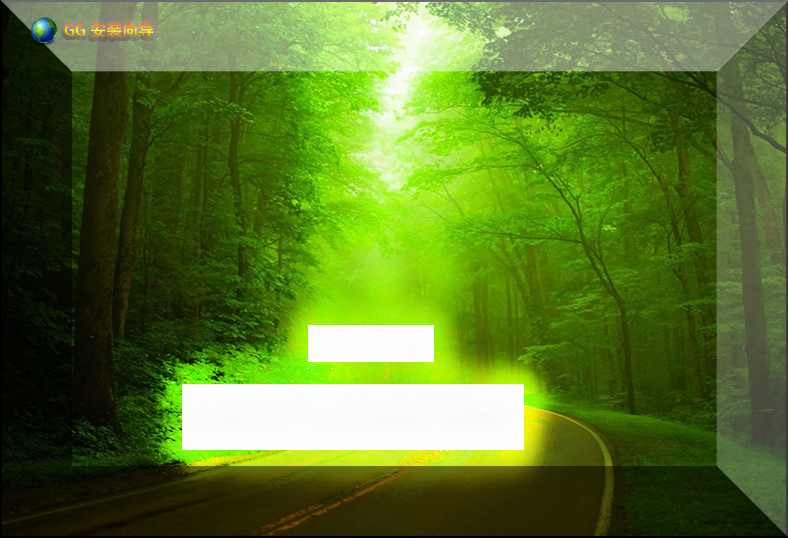
<style>
.page{position:relative;width:788px;height:538px}
.page>*{position:absolute;margin:0}
.t1{font:16px "AdobeHeitiStd-Regular"}
</style>
<div class="page">
<p class="t1" style="left:64px;top:22px;width:90px;height:16px">GG安装向导</p>
</div>
